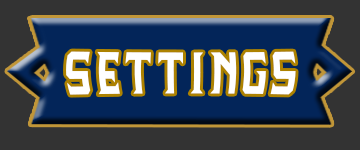
<style>
.page{position:relative;width:360px;height:150px;background:#333333}
.page>*{position:absolute;margin:0}
.t1{font:62.5px "Lorde-Havana";letter-spacing:0.1em;color:#ffffff;scale:0.75 1}
</style>
<div class="page">
<p class="t1" style="left:66px;top:51px;width:230px;height:44px">Settings</p>
</div>
